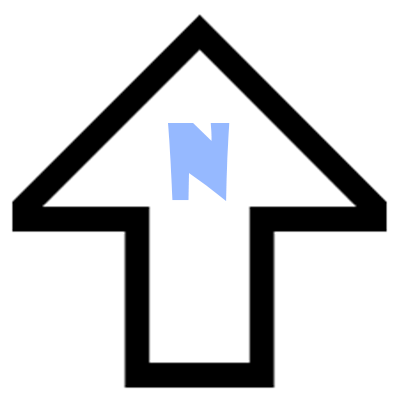
<style>
.page{position:relative;width:400px;height:400px;background:#ffffff}
.page>*{position:absolute;margin:0}
.t1{font:102px "ShowcardGothic-Reg";letter-spacing:-0.01em;color:#96b9ff}
</style>
<div class="page">
<p class="t1" style="left:168px;top:123px;width:62px;height:78px">N</p>
</div>
